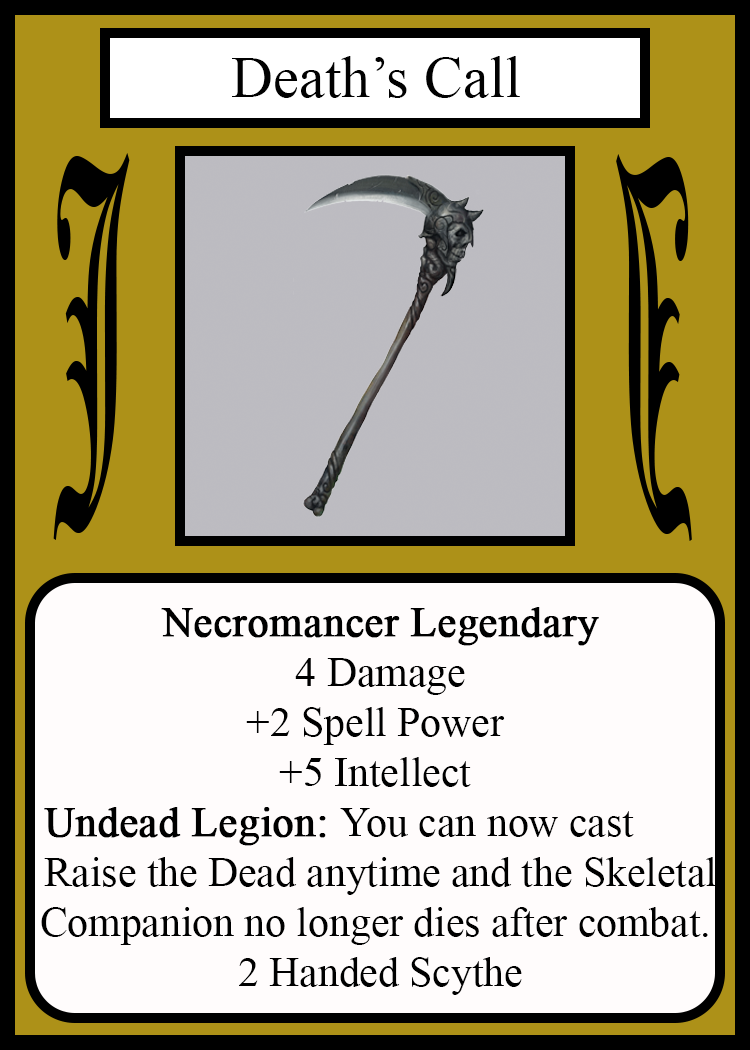
<style>
.page{position:relative;width:750px;height:1050px;background:#fffcfc}
.page>*{position:absolute;margin:0}
.t1{font:58.3px "TimesNewRomanPSMT";color:#010101}
.t2{font:450.1px "OldEnglishTextMT";color:#000000;scale:0.26 1}
.t3{font:449.7px "OldEnglishTextMT";color:#000000;scale:0.26 1}
.t4{font:41.7px "TimesNewRomanPSMT";color:#000000}
.t5{font:41.7px "TimesNewRomanPSMT";color:#000000;font-weight:bold}
</style>
<div class="page">
<p class="t1" style="left:232px;top:56px;width:288px;height:42px">Death’s Call</p>
<p class="t2" style="left:53px;top:153px;width:77px;height:387px">J</p>
<p class="t3" style="left:616px;top:154px;width:76px;height:387px;rotate:180deg">J</p>
<p class="t4" style="left:41px;top:607px;width:675px;height:388px;text-align:center"><span class="t5">Necromancer Legendary<br></span> 4 Damage<br>+2 Spell Power<br>+5 Intellect<br><span class="t5">Undead Legion: </span>You can now cast       <br> Raise the Dead anytime and the Skeletal<br>Companion no longer dies after combat.<br> 2 Handed Scythe</p>
</div>
